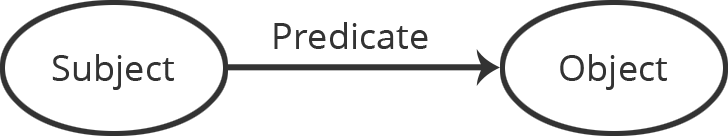
<style>
.page{position:relative;width:728px;height:136px;background:#ffffff}
.page>*{position:absolute;margin:0}
.t1{font:36px "OpenSans";color:#333333}
</style>
<div class="page">
<p class="t1" style="left:274px;top:22px;width:154px;height:27px">Predicate</p>
<p class="t1" style="left:52px;top:54px;width:122px;height:36px">Subject</p>
<p class="t1" style="left:560px;top:54px;width:107px;height:36px">Object</p>
</div>
